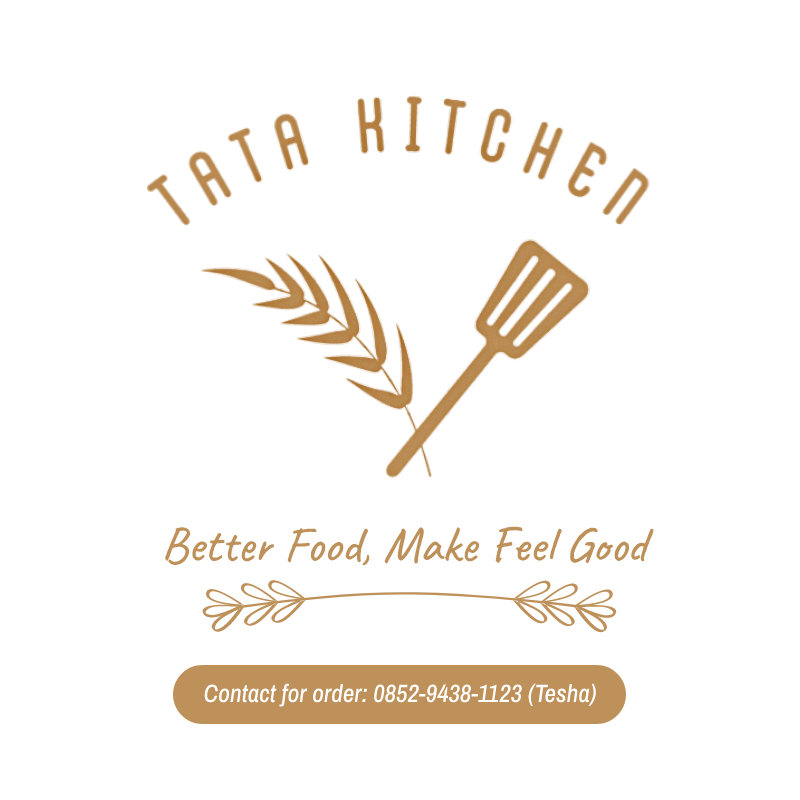
<style>
.page{position:relative;width:800px;height:800px;background:#ffffff}
.page>*{position:absolute;margin:0}
.t1{font:50.2px "Caveat-Medium";color:#be915b}
.t2{font:25px "ArchivoNarrow-MediumItalic";color:#ffffff}
</style>
<div class="page">
<p class="t1" style="left:165px;top:526px;width:489px;height:39px">Better Food, Make Feel Good</p>
<p class="t2" style="left:204px;top:683px;width:392px;height:24px">Contact for order: 0852-9438-1123 (Tesha)</p>
</div>
